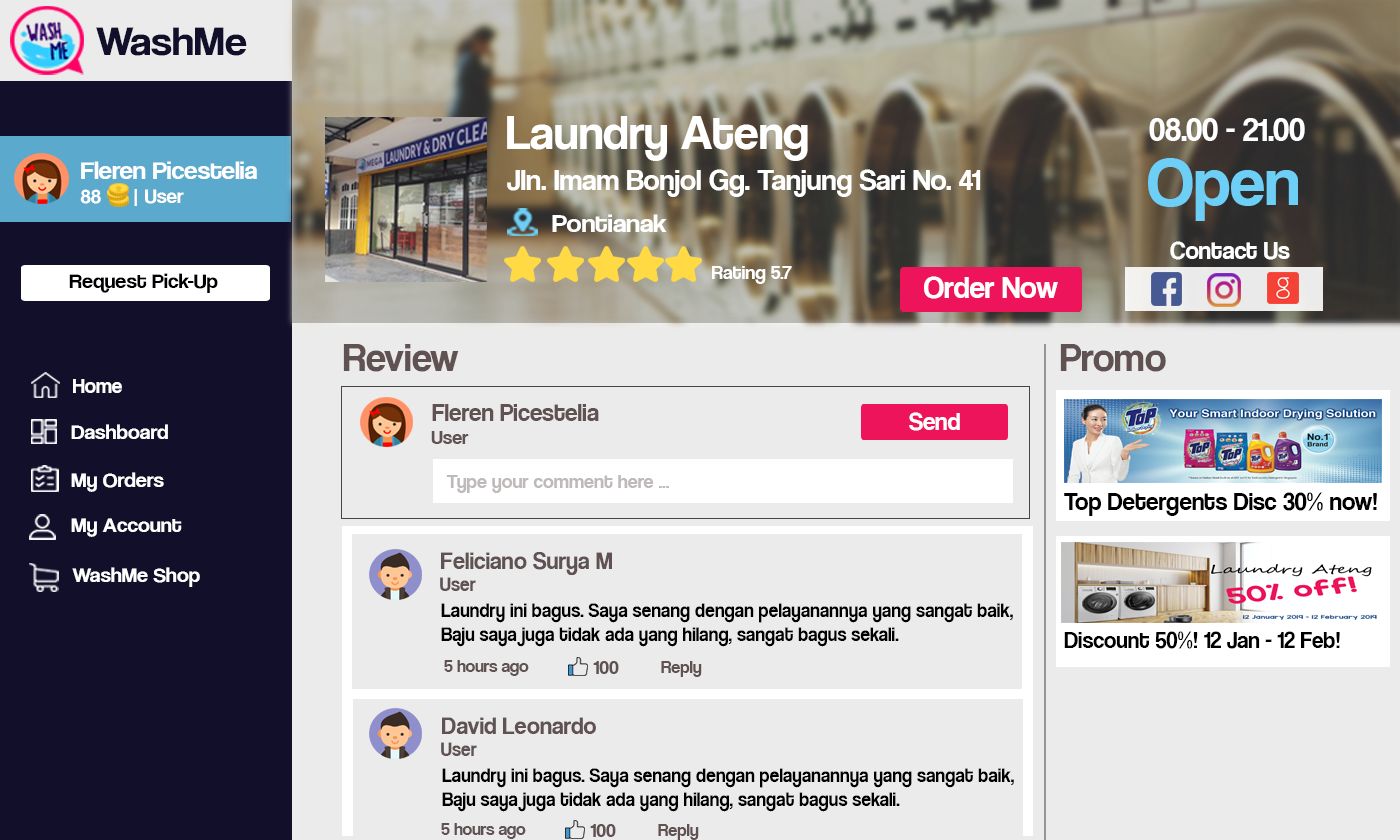
<style>
.page{position:relative;width:1400px;height:840px;background:#ebebeb}
.page>*{position:absolute;margin:0}
.t1{font:42.1px "CoolveticaRg-Regular";color:#120f2b;scale:1.05 1}
.t2{font:48.8px "CoolveticaRg-Regular";color:#ffffff}
.t3{font:33px "CoolveticaRg-Regular";color:#ffffff}
.t4{font:25.2px "CoolveticaRg-Regular";color:#ffffff;scale:1.05 1}
.t5{font:20px "CoolveticaRg-Regular";color:#ffffff;scale:1.05 1}
.t6{font:70.4px "CoolveticaRg-Regular";color:#6dcff6}
.t7{font:30px "CoolveticaRg-Regular";color:#ffffff}
.t8{font:25.6px "CoolveticaRg-Regular";color:#ffffff;scale:1.08 1}
.t9{font:25px "CoolveticaRg-Regular";color:#ffffff}
.t10{font:20px "CoolveticaRg-Regular";color:#ffffff}
.t11{font:21px "CoolveticaRg-Regular";color:#000000;scale:1.05 1}
.t12{font:31.2px "CoolveticaRg-Regular";color:#ffffff}
.t13{font:40px "CoolveticaRg-Regular";color:#605252}
.t14{font:21px "CoolveticaRg-Regular";color:#ffffff}
.t15{font:25px "CoolveticaRg-Regular";color:#605252}
.t16{font:21px "CoolveticaRg-Regular";color:#ffffff;scale:1.05 1}
.t17{font:20px "CoolveticaRg-Regular";color:#605252}
.t18{font:20px "CoolveticaRg-Regular";color:#bfb9b9}
.t19{font:25px "CoolveticaRg-Regular";color:#000000}
.t20{font:24.7px "CoolveticaRg-Regular";color:#605252}
.t21{font:19.7px "CoolveticaRg-Regular";color:#605252}
.t22{font:19.7px "CoolveticaRg-Regular";color:#000000}
.t23{font:23px "CoolveticaRg-Regular";color:#000000}
.t24{font:17.8px "CoolveticaRg-Regular";color:#605252}
.t25{font:18px "CoolveticaRg-Regular";color:#605252}
</style>
<div class="page">
<p class="t1" style="left:96px;top:27px;width:151px;height:29px">WashMe</p>
<p class="t2" style="left:507px;top:116px;width:301px;height:45px">Laundry Ateng</p>
<p class="t3" style="left:1149px;top:118px;width:156px;height:23px">08.00 - 21.00</p>
<p class="t4" style="left:80px;top:161px;width:177px;height:45px">Fleren Picestelia<br><span class="t5">88      | User</span></p>
<p class="t6" style="left:1148px;top:158px;width:150px;height:63px">Open</p>
<p class="t7" style="left:507px;top:169px;width:474px;height:28px">Jln. Imam Bonjol Gg. Tanjung Sari No. 41</p>
<p class="t8" style="left:552px;top:214px;width:115px;height:18px">Pontianak</p>
<p class="t9" style="left:1170px;top:241px;width:120px;height:19px">Contact Us</p>
<p class="t10" style="left:712px;top:266px;width:80px;height:18px">Rating 5.7</p>
<p class="t11" style="left:69px;top:273px;width:149px;height:20px">Request Pick-Up</p>
<p class="t12" style="left:924px;top:276px;width:134px;height:23px">Order Now</p>
<p class="t13" style="left:343px;top:344px;width:116px;height:28px">Review</p>
<p class="t13" style="left:1060px;top:344px;width:106px;height:28px">Promo</p>
<p class="t14" style="left:73px;top:379px;width:49px;height:14px">Home</p>
<p class="t15" style="left:432px;top:404px;width:167px;height:17px">Fleren Picestelia</p>
<p class="t9" style="left:909px;top:412px;width:51px;height:19px">Send</p>
<p class="t16" style="left:71px;top:424px;width:97px;height:15px">Dashboard</p>
<p class="t17" style="left:431px;top:431px;width:38px;height:13px">User</p>
<p class="t16" style="left:71px;top:472px;width:93px;height:20px">My Orders</p>
<p class="t18" style="left:446px;top:475px;width:223px;height:18px">Type your comment here ...</p>
<p class="t19" style="left:1064px;top:492px;width:313px;height:24px">Top Detergents Disc 30% now!</p>
<p class="t16" style="left:71px;top:518px;width:111px;height:19px">My Account</p>
<p class="t20" style="left:441px;top:552px;width:171px;height:24px">Feliciano Surya M</p>
<p class="t16" style="left:72px;top:567px;width:128px;height:20px">WashMe Shop</p>
<p class="t21" style="left:440px;top:577px;width:36px;height:14px">User</p>
<p class="t22" style="left:441px;top:603px;width:572px;height:44px">Laundry ini bagus. Saya senang dengan pelayanannya yang sangat baik,<br>Baju saya juga tidak ada yang hilang, sangat bagus sekali.</p>
<p class="t23" style="left:1064px;top:631px;width:276px;height:18px">Discount 50%! 12 Jan - 12 Feb!</p>
<p class="t24" style="left:444px;top:660px;width:85px;height:16px">5 hours ago</p>
<p class="t17" style="left:593px;top:661px;width:26px;height:13px">100</p>
<p class="t25" style="left:661px;top:661px;width:41px;height:16px">Reply</p>
<p class="t20" style="left:442px;top:717px;width:154px;height:17px">David Leonardo</p>
<p class="t21" style="left:441px;top:742px;width:36px;height:14px">User</p>
<p class="t22" style="left:442px;top:768px;width:572px;height:44px">Laundry ini bagus. Saya senang dengan pelayanannya yang sangat baik,<br>Baju saya juga tidak ada yang hilang, sangat bagus sekali.</p>
<p class="t24" style="left:441px;top:823px;width:85px;height:16px">5 hours ago</p>
<p class="t17" style="left:590px;top:824px;width:26px;height:13px">100</p>
<p class="t25" style="left:658px;top:824px;width:41px;height:16px">Reply</p>
</div>
